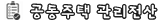
<style>
.page{position:relative;width:165px;height:21px;background:#ffffff}
.page>*{position:absolute;margin:0}
.t1{font:18px "SNSOE";letter-spacing:0.05em;color:#1e1e1e}
</style>
<div class="page">
<p class="t1" style="left:29px;top:3px;width:129px;height:17px">공동주택 관리전산</p>
</div>
